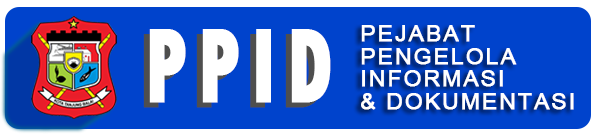
<style>
.page{position:relative;width:600px;height:137px;background:#0043cc}
.page>*{position:absolute;margin:0}
.t1{font:110.6px "TwCenMT-CondensedExtraBold";letter-spacing:0.1em;color:#ffffff;text-transform:uppercase;font-weight:bold;scale:0.76 1}
.t2{font:22.5px/22.5px "ArialMT";letter-spacing:0.075em;color:#ffffff;font-weight:bold}
</style>
<div class="page">
<p class="t1" style="left:149px;top:29px;width:182px;height:74px">PPID</p>
<p class="t2" style="left:361px;top:25px;width:213px;height:85px">PEJABAT<br>PENGELOLA<br>INFORMASI<br>&amp; DOKUMENTASI</p>
<p class="t1" style="left:143px;top:34px;width:182px;height:74px">PPID</p>
</div>
